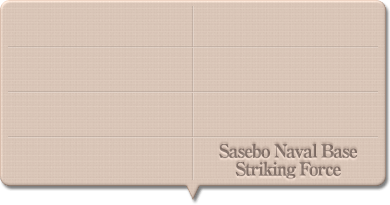
<style>
.page{position:relative;width:390px;height:205px}
.page>*{position:absolute;margin:0}
.t1{font:18px/18px "RyuminPro-ExBold";letter-spacing:-0.08em;color:#85746c}
</style>
<div class="page">
<p class="t1" style="left:219px;top:144px;width:139px;height:35px;text-align:center">Sasebo Naval Base<br>Striking Force</p>
</div>
